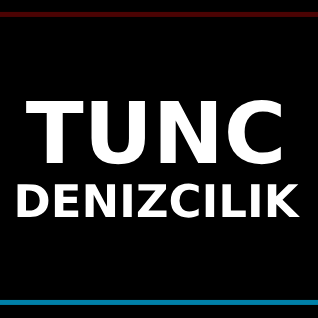
<style>
.page{position:relative;width:318px;height:318px;background:#000000}
.page>*{position:absolute;margin:0}
.t1{font:45px "DejaVuSans-Bold";color:#ffffff}
.t2{font:85px "DejaVuSans-Bold";color:#ffffff}
</style>
<div class="page">
<p class="t1" style="left:17px;top:99px;width:283px;height:119px;text-align:center"><span class="t2">TUNC<br></span>DENIZCILIK</p>
</div>
